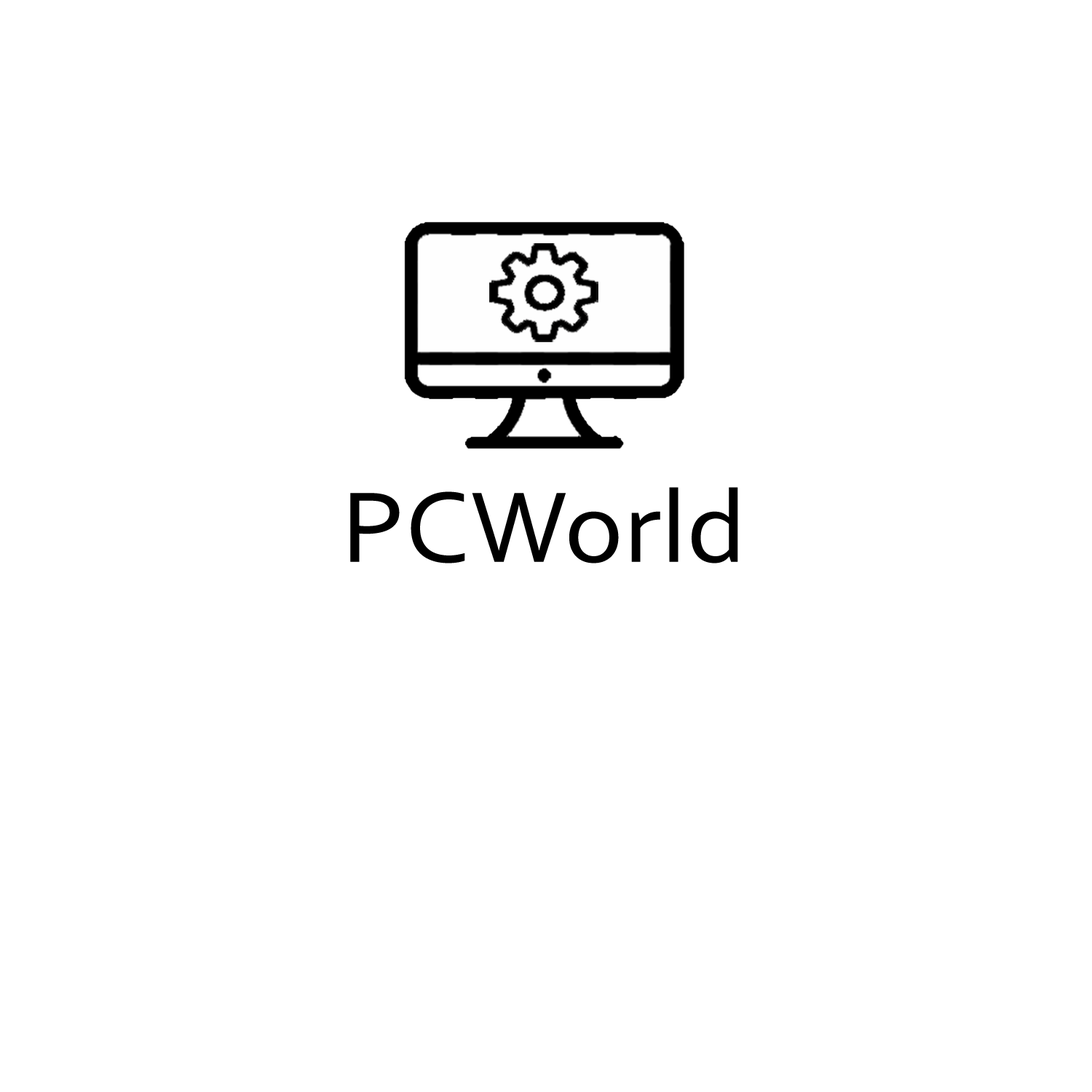
<style>
.page{position:relative;width:1092px;height:1092px;background:#ffffff}
.page>*{position:absolute;margin:0}
.t1{font:105.1px "Corbel";color:#000000;scale:1.06 1}
</style>
<div class="page">
<p class="t1" style="left:350px;top:487px;width:388px;height:76px">PCWorld</p>
</div>
